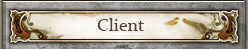
<style>
.page{position:relative;width:248px;height:49px}
.page>*{position:absolute;margin:0}
.t1{font:18px "Constantia";color:#5b3b30}
</style>
<div class="page">
<p class="t1" style="left:97px;top:18px;width:47px;height:13px">Client</p>
</div>
